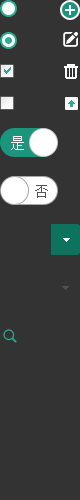
<style>
.page{position:relative;width:80px;height:500px;background:#333333}
.page>*{position:absolute;margin:0}
.t1{font:14px "SimSun";color:#ffffff}
.t2{font:14px "SimSun";color:#555555}
</style>
<div class="page">
<p class="t1" style="left:11px;top:136px;width:13px;height:14px">是</p>
<p class="t2" style="left:35px;top:185px;width:13px;height:13px">否</p>
</div>
